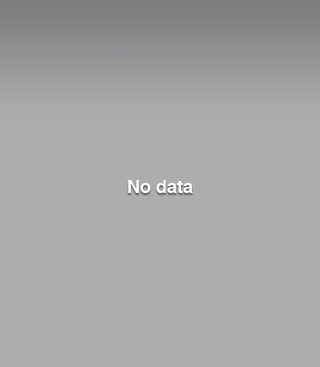
<style>
.page{position:relative;width:320px;height:367px;background:#adadb0}
.page>*{position:absolute;margin:0}
.t1{font:18px "Helvetica-Bold";color:#ffffff}
</style>
<div class="page">
<p class="t1" style="left:128px;top:180px;width:65px;height:13px">No data</p>
</div>
